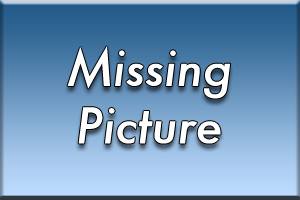
<style>
.page{position:relative;width:300px;height:200px}
.page>*{position:absolute;margin:0}
.t1{font:48px "Futura-MediumItalic";color:#ffffff}
</style>
<div class="page">
<p class="t1" style="left:67px;top:46px;width:164px;height:98px;text-align:center">Missing<br>Picture</p>
</div>
